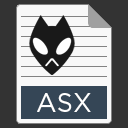
<style>
.page{position:relative;width:128px;height:128px;background:#f8f8f8}
.page>*{position:absolute;margin:0}
.t1{font:26px "Gotham-Book";color:#ffffff}
</style>
<div class="page">
<p class="t1" style="left:37px;top:93px;width:54px;height:19px">ASX</p>
</div>
